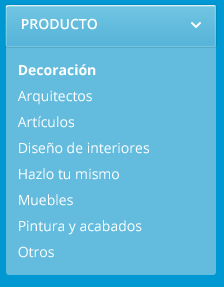
<style>
.page{position:relative;width:224px;height:287px;background:#63bcdd}
.page>*{position:absolute;margin:0}
.t1{font:14px "OpenSans-Semibold";color:#ffffff}
.t2{font:14px/26px "OpenSans";color:#ffffff}
.t3{font:14px/40px "OpenSans-Bold";color:#ffffff}
</style>
<div class="page">
<p class="t1" style="left:22px;top:18px;width:75px;height:12px">PRODUCTO</p>
<p class="t2" style="left:17px;top:64px;width:132px;height:194px"><span class="t3">Decoración<br></span>Arquitectos<br>Artículos <br>Diseño de interiores<br>Hazlo tu mismo<br>Muebles<br>Pintura y acabados<br>Otros</p>
</div>
